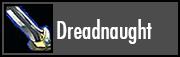
<style>
.page{position:relative;width:180px;height:57px;background:#4c4c4c}
.page>*{position:absolute;margin:0}
.t1{font:24px "FuturaCondensed";color:#ffffff}
</style>
<div class="page">
<p class="t1" style="left:57px;top:19px;width:95px;height:25px">Dreadnaught</p>
</div>
